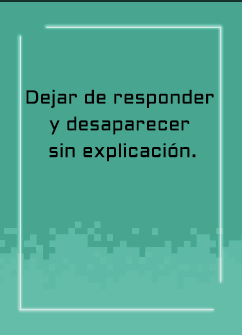
<style>
.page{position:relative;width:242px;height:335px;background:#47a590}
.page>*{position:absolute;margin:0}
.t1{font:19.2px/26.7px "Aldrich-Regular";letter-spacing:0.005em;color:#000000}
</style>
<div class="page">
<p class="t1" style="left:26px;top:89px;width:188px;height:73px;text-align:center">Dejar de responder <br>y desaparecer <br>sin explicación.</p>
</div>
